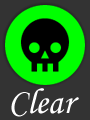
<style>
.page{position:relative;width:90px;height:120px;background:#333333}
.page>*{position:absolute;margin:0}
.t1{font:36px "MonotypeCorsiva";color:#ffffff}
</style>
<div class="page">
<p class="t1" style="left:11px;top:88px;width:68px;height:29px">Clear</p>
</div>
